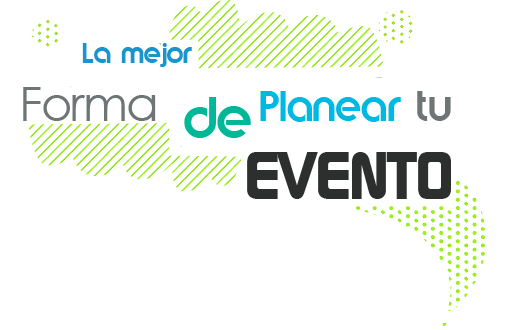
<style>
.page{position:relative;width:509px;height:330px;background:#ffffff}
.page>*{position:absolute;margin:0}
.t1{font:24px "Brandish";letter-spacing:-0.04em;color:#1a94cc}
.t2{font:24px "Brandish";letter-spacing:-0.04em;color:#6e7675}
.t3{font:48px "CenturyGothic";letter-spacing:-0.04em;color:#6e7675}
.t4{font:36px "Brandish";letter-spacing:-0.04em;color:#00b9e3}
.t5{font:36px "Brandish";letter-spacing:-0.04em;color:#6e7675}
.t6{font:65px "DicotBold";letter-spacing:-0.04em;color:#2d2f2f}
.t7{font:49.6px "Brandish";letter-spacing:-0.04em;color:#00b797}
</style>
<div class="page">
<p class="t1" style="left:23px;top:43px;width:428px;height:156px"><span class="t2">                   </span>La mejor <br>         <span class="t3">Forma       </span><span class="t4">Planear</span><span class="t5"> tu <br>                        </span><span class="t6">EVENTO</span></p>
<p class="t7" style="left:184px;top:97px;width:67px;height:41px">de</p>
</div>
